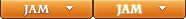
<style>
.page{position:relative;width:186px;height:19px}
.page>*{position:absolute;margin:0}
.t1{font:11px "CharlemagneStd-Bold";color:#ffffff;font-weight:bold}
</style>
<div class="page">
<p class="t1" style="left:24px;top:5px;width:26px;height:11px">Jam</p>
<p class="t1" style="left:117px;top:5px;width:26px;height:11px">Jam</p>
</div>
